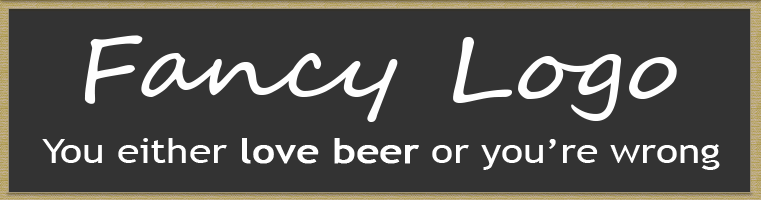
<style>
.page{position:relative;width:761px;height:200px;background:#333333}
.page>*{position:absolute;margin:0}
.t1{font:88px "SegoeScript";color:#fefefe;scale:1.19 1}
.t2{font:34.1px "TrebuchetMS";color:#ffffff;scale:1.19 1}
.t3{font:34.1px "TrebuchetMS";color:#ffffff;font-weight:bold;scale:1.19 1}
</style>
<div class="page">
<p class="t1" style="left:84px;top:35px;width:593px;height:87px">Fancy Logo</p>
<p class="t2" style="left:42px;top:138px;width:678px;height:32px">You either <span class="t3">love beer</span> or you’re wrong</p>
</div>
